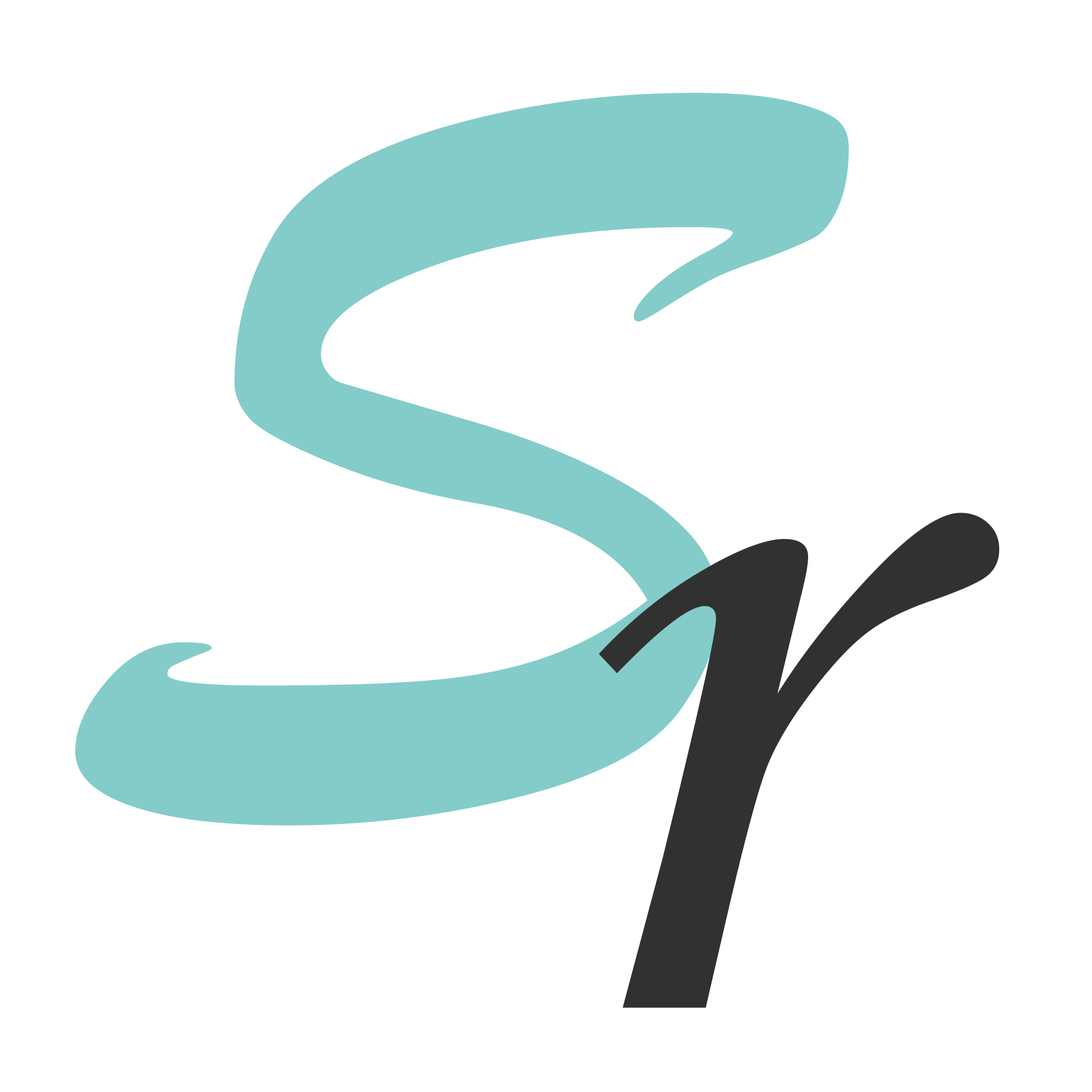
<style>
.page{position:relative;width:1092px;height:1092px;background:#ffffff}
.page>*{position:absolute;margin:0}
.t1{font:1137.5px "STXingkai";color:#84ccc9}
.t2{font:1137.5px "STLiti";color:#313131}
</style>
<div class="page">
<p class="t1" style="left:75px;top:93px;width:774px;height:733px">S</p>
<p class="t2" style="left:598px;top:513px;width:402px;height:495px">r</p>
</div>
